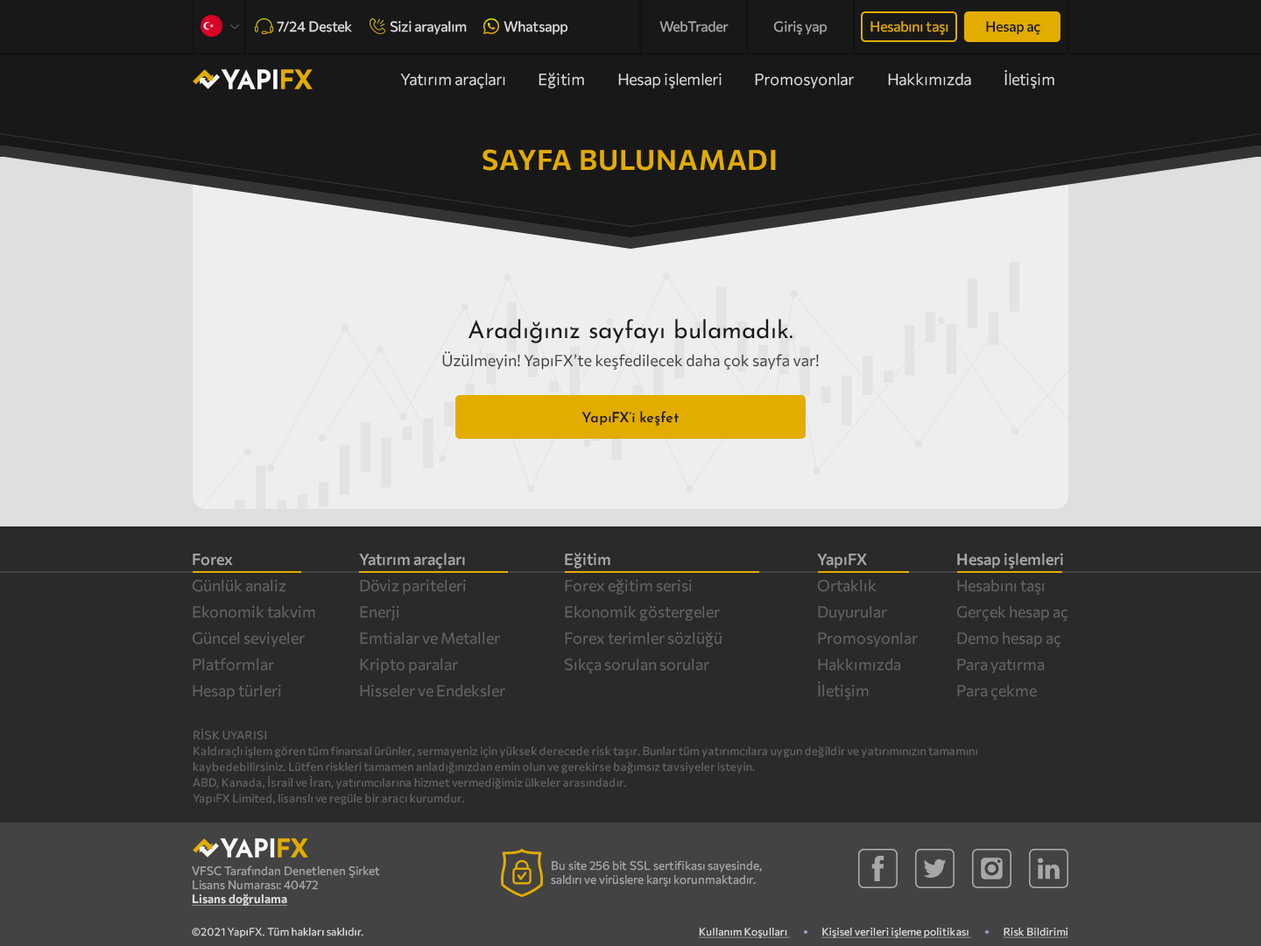
<style>
.page{position:relative;width:1261px;height:946px;background:#2a2a2a}
.page>*{position:absolute;margin:0}
.t1{font:14px "Commissioner-Regular";color:#dfdfdf}
.t2{font:14px "Commissioner-Regular";color:#a9a8a8}
.t3{font:14px "Commissioner-Regular";color:#e2ac00}
.t4{font:14px "Commissioner-Medium";color:#181818}
.t5{font:15.8px "Commissioner-Light";color:#dfdfdf}
.t6{font:28px "Commissioner-SemiBold";letter-spacing:0.025em;color:#e2ac00}
.t7{font:24.5px "JosefinSans-Regular";color:#181818}
.t8{font:15.8px "Commissioner-Regular";color:#404040}
.t9{font:14px "JosefinSans-SemiBold";color:#181818}
.t10{font:15.8px/26.3px "Commissioner-Regular";color:#626262}
.t11{font:15.8px/26.3px "Commissioner-Medium";color:#a9a8a8}
.t12{font:11.4px/15.8px "Commissioner-Regular";letter-spacing:0.025em;color:#626262}
.t13{font:11.8px "Commissioner-Regular";color:#a9a8a8}
.t14{font:11.8px "Commissioner-SemiBold";color:#dfdfdf;text-decoration:underline}
.t15{font:10.5px "Commissioner-Light";letter-spacing:0.025em;color:#dfdfdf}
.t16{font:10.5px "Commissioner-Regular";letter-spacing:0.025em;color:#dfdfdf;text-decoration:underline}
</style>
<div class="page">
<p class="t1" style="left:277px;top:21px;width:75px;height:11px">7/24 Destek</p>
<p class="t1" style="left:390px;top:21px;width:77px;height:14px">Sizi arayalım</p>
<p class="t1" style="left:503px;top:21px;width:65px;height:14px">Whatsapp</p>
<p class="t2" style="left:659px;top:21px;width:70px;height:11px">WebTrader</p>
<p class="t2" style="left:773px;top:21px;width:54px;height:14px">Giriş yap</p>
<p class="t3" style="left:870px;top:21px;width:78px;height:14px">Hesabını taşı</p>
<p class="t4" style="left:986px;top:21px;width:54px;height:14px">Hesap aç</p>
<p class="t5" style="left:400px;top:73px;width:105px;height:15px">Yatırım araçları</p>
<p class="t5" style="left:539px;top:73px;width:45px;height:15px">Eğitim</p>
<p class="t5" style="left:618px;top:73px;width:104px;height:15px">Hesap işlemleri</p>
<p class="t5" style="left:755px;top:73px;width:99px;height:15px">Promosyonlar</p>
<p class="t5" style="left:888px;top:73px;width:83px;height:13px">Hakkımızda</p>
<p class="t5" style="left:1004px;top:70px;width:50px;height:18px">İletişim</p>
<p class="t6" style="left:482px;top:149px;width:294px;height:22px">SAYFA BULUNAMADI</p>
<p class="t7" style="left:468px;top:319px;width:324px;height:24px">Aradığınız sayfayı bulamadık.</p>
<p class="t8" style="left:442px;top:351px;width:377px;height:19px">Üzülmeyin! YapıFX’te keşfedilecek daha çok sayfa var!</p>
<p class="t9" style="left:581px;top:411px;width:98px;height:15px">YapıFX’i keşfet</p>
<p class="t10" style="left:192px;top:553px;width:123px;height:147px"><span class="t11">Forex<br></span>Günlük analiz<br>Ekonomik takvim<br>Güncel seviyeler<br>Platformlar<br>Hesap türleri</p>
<p class="t10" style="left:359px;top:553px;width:146px;height:144px"><span class="t11">Yatırım araçları<br></span>Döviz pariteleri<br>Enerji<br>Emtialar ve Metaller<br>Kripto paralar<br>Hisseler ve Endeksler</p>
<p class="t10" style="left:564px;top:553px;width:158px;height:120px"><span class="t11">Eğitim<br></span>Forex eğitim serisi<br>Ekonomik göstergeler<br>Forex terimler sözlüğü<br>Sıkça sorulan sorular</p>
<p class="t10" style="left:817px;top:553px;width:101px;height:147px"><span class="t11">YapıFX<br></span>Ortaklık<br>Duyurular<br>Promosyonlar<br>Hakkımızda<br>İletişim</p>
<p class="t10" style="left:956px;top:553px;width:112px;height:147px"><span class="t11">Hesap işlemleri<br></span>Hesabını taşı<br>Gerçek hesap aç<br>Demo hesap aç<br>Para yatırma<br>Para çekme</p>
<p class="t12" style="left:193px;top:728px;width:784px;height:77px">RİSK UYARISI<br>Kaldıraçlı işlem gören tüm finansal ürünler, sermayeniz için yüksek derecede risk taşır. Bunlar tüm yatırımcılara uygun değildir ve yatırımınızın tamamını kaybedebilirsiniz. Lütfen riskleri tamamen anladığınızdan emin olun ve gerekirse bağımsız tavsiyeler isteyin.<br>ABD, Kanada, İsrail ve İran, yatırımcılarına hizmet vermediğimiz ülkeler arasındadır.<br>YapıFX Limited, lisanslı ve regüle bir aracı kurumdur.</p>
<p class="t13" style="left:192px;top:865px;width:188px;height:40px">VFSC Tarafından Denetlenen Şirket<br>Lisans Numarası: 40472<br><span class="t14">Lisans doğrulama</span></p>
<p class="t13" style="left:551px;top:860px;width:211px;height:27px">Bu site 256 bit SSL sertifikası sayesinde,<br>saldırı ve virüslere karşı korunmaktadır.</p>
<p class="t15" style="left:192px;top:927px;width:171px;height:11px">©2021 YapıFX. Tüm hakları saklıdır.</p>
<p class="t16" style="left:699px;top:927px;width:369px;height:11px">Kullanım Koşulları                 Kişisel verileri işleme politikası                 Risk Bildirimi</p>
</div>
